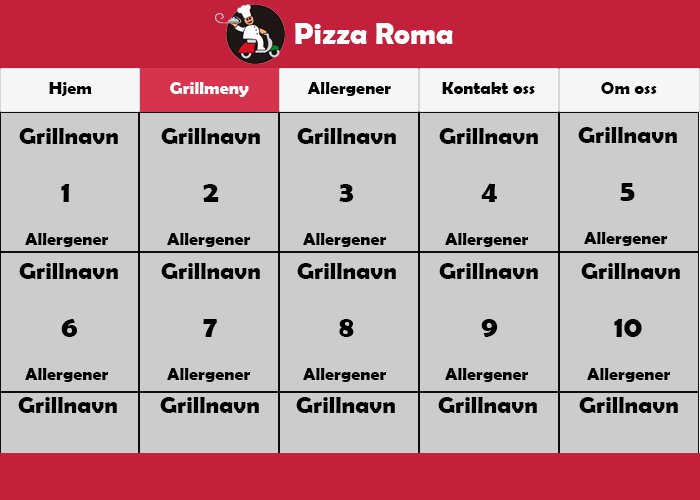
<style>
.page{position:relative;width:700px;height:500px;background:#cccccc}
.page>*{position:absolute;margin:0}
.t1{font:30px "BerlinSansFBDemi-Bold";color:#ffffff}
.t2{font:18px "BerlinSansFBDemi-Bold";color:#000000}
.t3{font:18px "BerlinSansFBDemi-Bold";color:#ffffff}
.t4{font:24px "BerlinSansFBDemi-Bold";color:#000000}
.t5{font:30px "BerlinSansFBDemi-Bold";color:#000000}
</style>
<div class="page">
<p class="t1" style="left:295px;top:23px;width:158px;height:21px">Pizza Roma</p>
<p class="t2" style="left:49px;top:82px;width:43px;height:14px">Hjem</p>
<p class="t3" style="left:170px;top:82px;width:79px;height:15px">Grillmeny</p>
<p class="t2" style="left:307px;top:82px;width:84px;height:14px">Allergener</p>
<p class="t2" style="left:442px;top:82px;width:93px;height:12px">Kontakt oss</p>
<p class="t2" style="left:601px;top:82px;width:56px;height:12px">Om oss</p>
<p class="t2" style="left:19px;top:128px;width:99px;height:119px"><span class="t4">  Grillnavn<br><br>     </span><span class="t5">1  <br></span><br>    Allergener</p>
<p class="t2" style="left:161px;top:128px;width:99px;height:119px"><span class="t4">  Grillnavn<br><br>     </span><span class="t5">2  <br></span><br>    Allergener</p>
<p class="t2" style="left:297px;top:128px;width:99px;height:119px"><span class="t4">  Grillnavn<br><br>     </span><span class="t5">3  <br></span><br>    Allergener</p>
<p class="t2" style="left:439px;top:128px;width:99px;height:119px"><span class="t4">  Grillnavn<br><br>     </span><span class="t5">4  <br></span><br>    Allergener</p>
<p class="t2" style="left:578px;top:127px;width:99px;height:119px"><span class="t4">  Grillnavn<br><br>     </span><span class="t5">5  <br></span><br>    Allergener</p>
<p class="t2" style="left:19px;top:263px;width:99px;height:119px"><span class="t4">  Grillnavn<br><br>     </span><span class="t5">6  <br></span><br>    Allergener</p>
<p class="t2" style="left:161px;top:263px;width:99px;height:119px"><span class="t4">  Grillnavn<br><br>     </span><span class="t5">7  <br></span><br>    Allergener</p>
<p class="t2" style="left:297px;top:263px;width:99px;height:119px"><span class="t4">  Grillnavn<br><br>     </span><span class="t5">8  <br></span><br>    Allergener</p>
<p class="t2" style="left:439px;top:263px;width:99px;height:119px"><span class="t4">  Grillnavn<br><br>     </span><span class="t5">9  <br></span><br>    Allergener</p>
<p class="t2" style="left:581px;top:263px;width:99px;height:119px"><span class="t4">  Grillnavn<br><br>   </span><span class="t5">10  <br></span><br>    Allergener</p>
</div>
